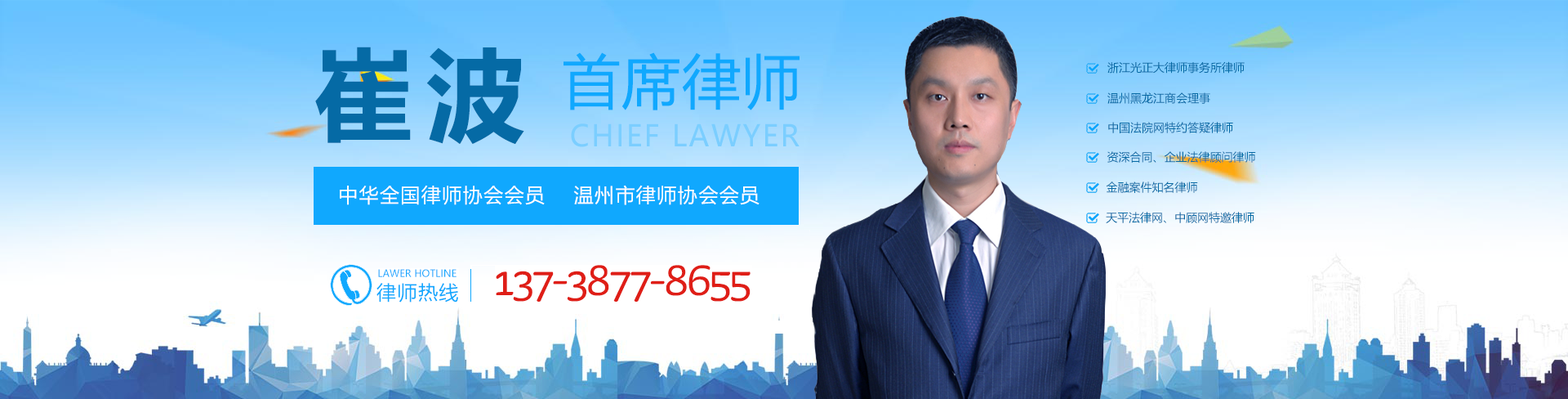
<style>
.page{position:relative;width:1568px;height:399px}
.page>*{position:absolute;margin:0}
.t1{font:99.6px "MicrosoftYaHei-Bold";letter-spacing:0.12em;color:#056aa5}
.t2{font:58.8px "MicrosoftYaHei";letter-spacing:0.02em;color:#10a8fe}
.t3{font:11.4px "MicrosoftYaHei";color:#056aa5}
.t4{font:29.4px "MicrosoftYaHei";letter-spacing:0.06em;color:#7bceff}
</style>
<div class="page">
<p class="t1" style="left:315px;top:47px;width:209px;height:97px">崔波</p>
<p class="t2" style="left:564px;top:52px;width:236px;height:58px">首席律师</p>
<p class="t3" style="left:1107px;top:61px;width:138px;height:13px">浙江光正大律师事务所律师</p>
<p class="t3" style="left:1107px;top:92px;width:103px;height:12px">温州黑龙江商会理事</p>
<p class="t4" style="left:571px;top:123px;width:229px;height:24px">CHIEF LAWYER</p>
<p class="t3" style="left:1108px;top:122px;width:125px;height:11px">中国法院网特约答疑律师</p>
<p class="t3" style="left:1107px;top:151px;width:149px;height:12px">资深合同、企业法律顾问律师</p>
<p class="t3" style="left:1106px;top:181px;width:92px;height:12px">金融案件知名律师</p>
<p class="t3" style="left:1106px;top:212px;width:148px;height:11px">天平法律网、中顾网特邀律师</p>
</div>
